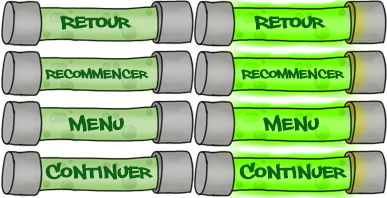
<style>
.page{position:relative;width:387px;height:198px}
.page>*{position:absolute;margin:0}
.t1{font:25px "PhillySans";color:#0a6512}
.t2{font:17.9px "PhillySans";color:#0a6512}
</style>
<div class="page">
<p class="t1" style="left:60px;top:15px;width:72px;height:15px">Retour</p>
<p class="t1" style="left:254px;top:15px;width:72px;height:15px">Retour</p>
<p class="t2" style="left:45px;top:67px;width:104px;height:13px">Recommencer</p>
<p class="t2" style="left:241px;top:67px;width:104px;height:13px">Recommencer</p>
<p class="t1" style="left:68px;top:114px;width:56px;height:18px">Menu</p>
<p class="t1" style="left:263px;top:114px;width:56px;height:18px">Menu</p>
<p class="t1" style="left:45px;top:162px;width:108px;height:18px">Continuer</p>
<p class="t1" style="left:239px;top:162px;width:108px;height:18px">Continuer</p>
</div>
